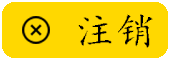
<style>
.page{position:relative;width:170px;height:60px;background:#ffd800}
.page>*{position:absolute;margin:0}
.t1{font:40px "¿¬Ìå";color:#000000}
</style>
<div class="page">
<p class="t1" style="left:78px;top:14px;width:75px;height:34px">注销</p>
</div>
